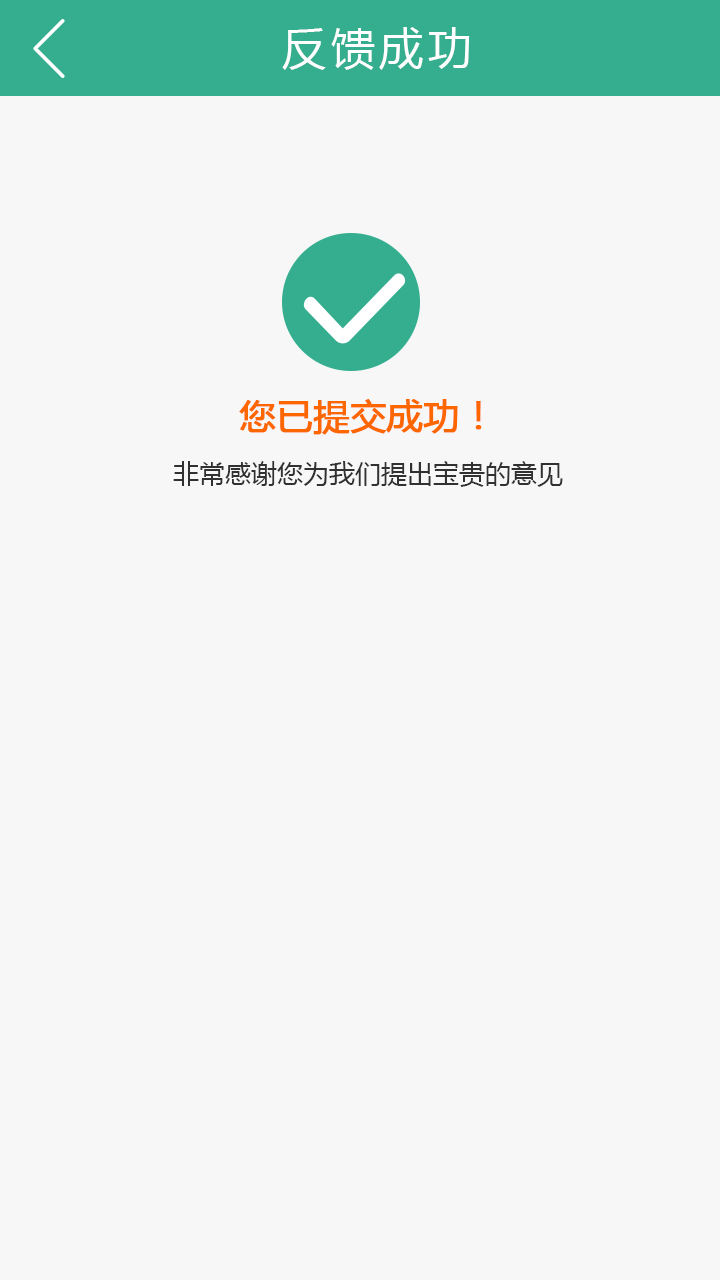
<style>
.page{position:relative;width:720px;height:1280px;background:#f7f7f7}
.page>*{position:absolute;margin:0}
.t1{font:44px "MicrosoftYaHei";letter-spacing:0.1em;color:#ffffff}
.t2{font:26px "MicrosoftYaHei";color:#313131}
.t3{font:36px "MicrosoftYaHei";color:#fe6600;font-weight:bold}
</style>
<div class="page">
<p class="t1" style="left:282px;top:27px;width:188px;height:43px">反馈成功</p>
<p class="t2" style="left:173px;top:399px;width:390px;height:88px;text-align:center"><span class="t3">您已提交成功！<br></span>非常感谢您为我们提出宝贵的意见</p>
</div>
